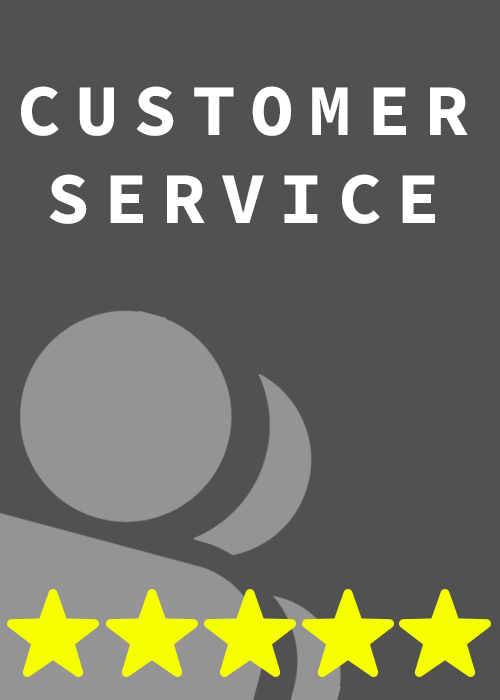
<style>
.page{position:relative;width:500px;height:700px;background:#515151}
.page>*{position:absolute;margin:0}
.t1{font:72.9px "SourceCodePro-Bold";letter-spacing:0.2em;color:#ffffff;text-transform:uppercase}
</style>
<div class="page">
<p class="t1" style="left:21px;top:86px;width:447px;height:138px;text-align:center">CUSTOMER<br>SERVICE</p>
</div>
